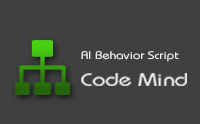
<style>
.page{position:relative;width:200px;height:124px;background:#404040}
.page>*{position:absolute;margin:0}
.t1{font:11px "Celevenia-ExpandedRegular";color:#efefef}
</style>
<div class="page">
<p class="t1" style="left:81px;top:51px;width:98px;height:11px">AI Behavior Script</p>
</div>
